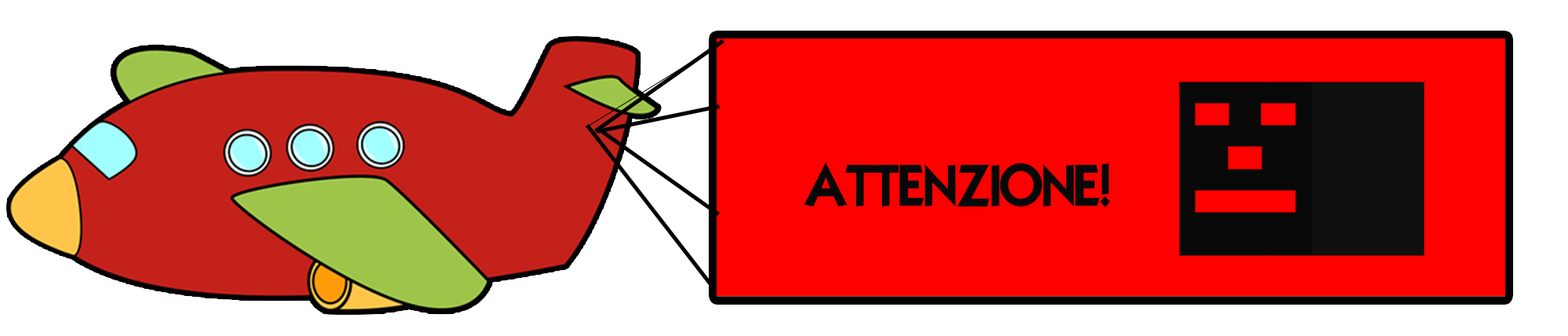
<style>
.page{position:relative;width:1568px;height:336px;background:#ffffff}
.page>*{position:absolute;margin:0}
.t1{font:56.4px "ELEGANCE";color:#080808}
</style>
<div class="page">
<p class="t1" style="left:804px;top:162px;width:306px;height:45px">ATTENZIONE!</p>
</div>
